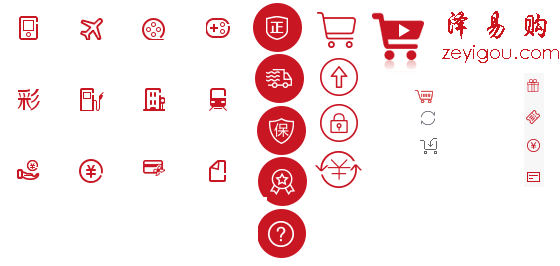
<style>
.page{position:relative;width:560px;height:266px;background:#ffffff}
.page>*{position:absolute;margin:0}
.t1{font:30px "STXingkai";color:#ca161c}
.t2{font:18px "STXihei";color:#ca161c}
</style>
<div class="page">
<p class="t1" style="left:448px;top:11px;width:99px;height:28px">泽 易 购</p>
<p class="t2" style="left:442px;top:45px;width:117px;height:18px">zeyigou.com</p>
</div>
